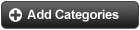
<style>
.page{position:relative;width:140px;height:30px}
.page>*{position:absolute;margin:0}
.t1{font:13px "Arial-BoldMT";letter-spacing:-0.025em;color:#ffffff}
</style>
<div class="page">
<p class="t1" style="left:27px;top:9px;width:92px;height:13px">Add Categories</p>
</div>
